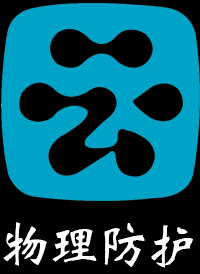
<style>
.page{position:relative;width:200px;height:274px;background:#000000}
.page>*{position:absolute;margin:0}
.t1{font:55px "STXinwei";letter-spacing:-0.105em;color:#ffffff}
</style>
<div class="page">
<p class="t1" style="left:3px;top:222px;width:190px;height:46px">物理防护</p>
</div>
